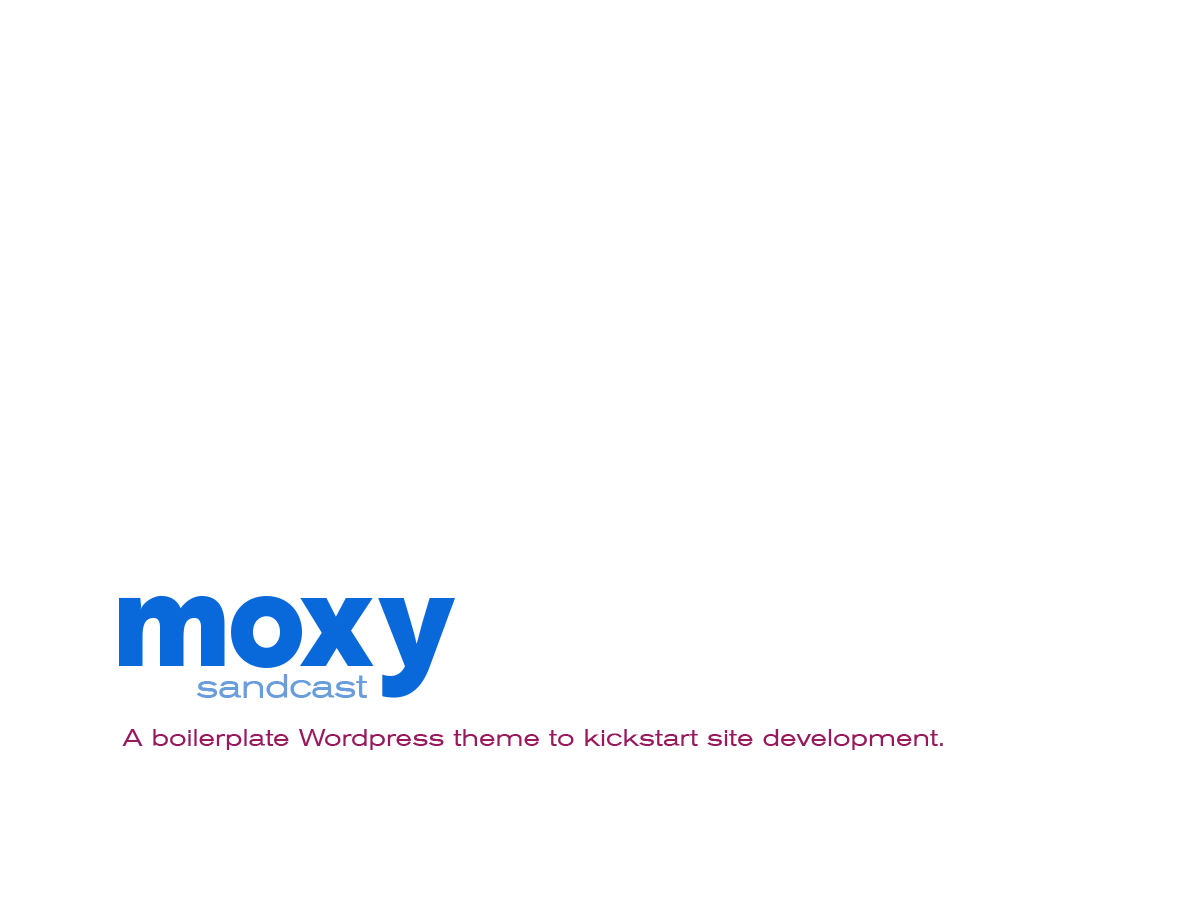
<style>
.page{position:relative;width:1200px;height:900px;background:#ffffff}
.page>*{position:absolute;margin:0}
.t1{font:136.2px "Brother-1816-ExtraBold";letter-spacing:-0.025em;color:#0969db;scale:0.96 1}
.t2{font:136.2px "Brother-1816-ExtraBold";letter-spacing:0.025em;color:#0969db;scale:0.96 1}
.t3{font:34.1px "AkzidenzGrotExtBQ-Regular";letter-spacing:-0.025em;color:#699ddb}
.t4{font:24px "AkzidenzGrotExtBQ-Regular";color:#991a5c}
</style>
<div class="page">
<p class="t1" style="left:119px;top:595px;width:336px;height:103px">mo<span class="t2">xy</span></p>
<p class="t3" style="left:196px;top:674px;width:171px;height:24px">sandcast</p>
<p class="t4" style="left:122px;top:729px;width:821px;height:21px">A boilerplate Wordpress theme to kickstart site development.</p>
</div>
